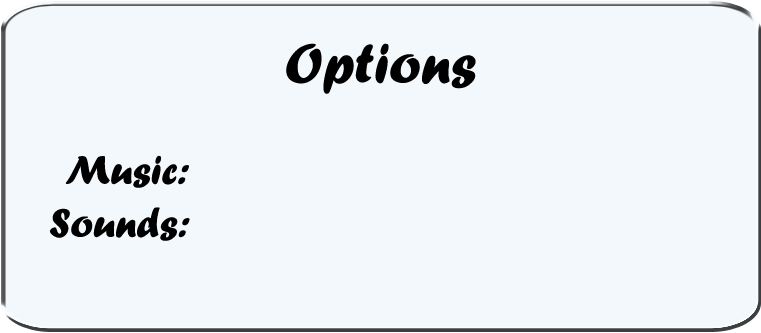
<style>
.page{position:relative;width:761px;height:333px;background:#f3f8fc}
.page>*{position:absolute;margin:0}
.t1{font:58.3px "ForteMT";color:#000000}
.t2{font:41.7px "ForteMT";color:#000000}
</style>
<div class="page">
<p class="t1" style="left:286px;top:43px;width:190px;height:51px">Options</p>
<p class="t2" style="left:65px;top:155px;width:124px;height:33px">Music:</p>
<p class="t2" style="left:49px;top:207px;width:141px;height:34px">Sounds:</p>
</div>
